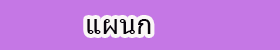
<style>
.page{position:relative;width:280px;height:50px;background:#c577e5}
.page>*{position:absolute;margin:0}
.t1{font:27.8px "Tahoma";color:#09020c}
</style>
<div class="page">
<p class="t1" style="left:87px;top:19px;width:64px;height:15px">แผนก</p>
</div>
